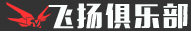
<style>
.page{position:relative;width:191px;height:31px;background:#333333}
.page>*{position:absolute;margin:0}
.t1{font:26px "MFLiHei_Noncommercial-Regular";letter-spacing:0.1em;color:#fafefd}
</style>
<div class="page">
<p class="t1" style="left:48px;top:3px;width:140px;height:26px">飞扬俱乐部</p>
</div>
